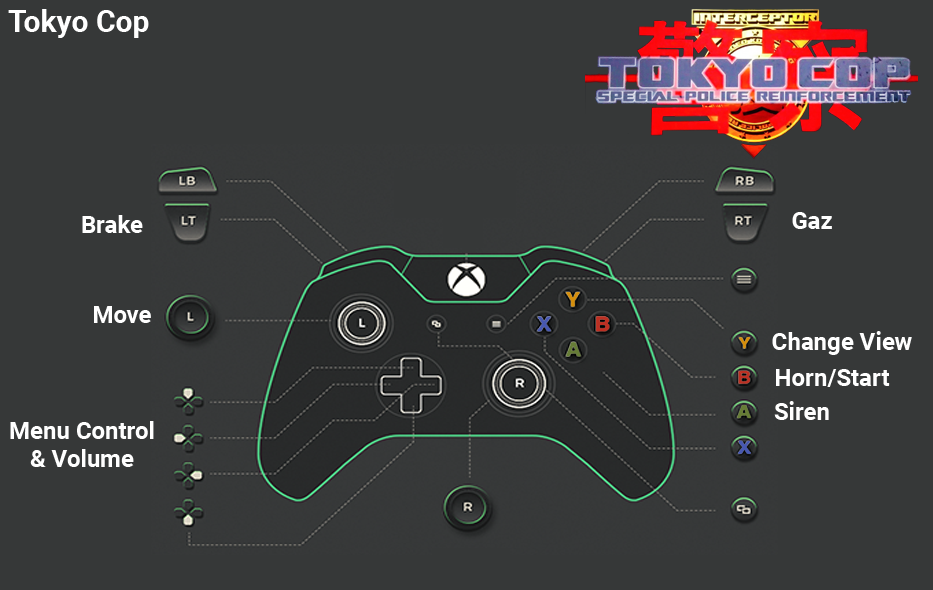
<style>
.page{position:relative;width:933px;height:590px;background:#363838}
.page>*{position:absolute;margin:0}
.t1{font:30px "Roboto-Bold";color:#ffffff}
.t2{font:24px "Roboto-Bold";color:#ffffff}
.t3{font:24px/28px "Roboto-Bold";color:#ffffff}
</style>
<div class="page">
<p class="t1" style="left:8px;top:9px;width:141px;height:29px">Tokyo Cop</p>
<p class="t2" style="left:82px;top:215px;width:61px;height:18px">Brake</p>
<p class="t2" style="left:792px;top:212px;width:40px;height:17px">Gaz</p>
<p class="t2" style="left:94px;top:306px;width:57px;height:17px">Move</p>
<p class="t2" style="left:772px;top:331px;width:140px;height:24px">Change View</p>
<p class="t2" style="left:776px;top:369px;width:114px;height:18px">Horn/Start</p>
<p class="t2" style="left:774px;top:401px;width:55px;height:19px">Siren</p>
<p class="t3" style="left:10px;top:421px;width:144px;height:46px;text-align:center">Menu Control<br>&amp; Volume</p>
</div>
